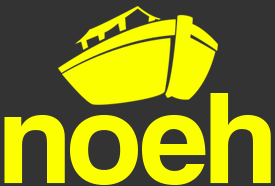
<style>
.page{position:relative;width:275px;height:186px;background:#333333}
.page>*{position:absolute;margin:0}
.t1{font:134.3px "CoolveticaRg-Regular";color:#fcff00}
</style>
<div class="page">
<p class="t1" style="left:4px;top:93px;width:267px;height:92px">noeh</p>
</div>
